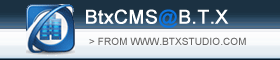
<style>
.page{position:relative;width:280px;height:60px}
.page>*{position:absolute;margin:0}
.t1{font:19.2px "ArialMT";color:#ffffff;font-weight:bold}
.t2{font:19.2px "ArialMT";color:#0b74e1;font-weight:bold}
.t3{font:10px "ArialMT";letter-spacing:0.01em;color:#676666;text-transform:uppercase}
</style>
<div class="page">
<p class="t1" style="left:86px;top:9px;width:143px;height:19px">BtxCMS<span class="t2">@</span>B.T.X</p>
<p class="t3" style="left:89px;top:37px;width:157px;height:8px">&gt; From www.BTXStudio.com</p>
</div>
